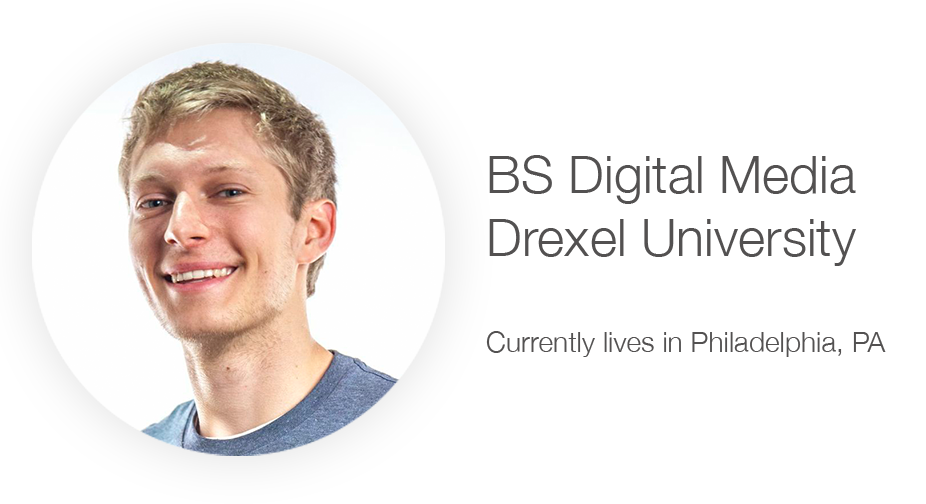
<style>
.page{position:relative;width:926px;height:504px;background:#ffffff}
.page>*{position:absolute;margin:0}
.t1{font:28.3px "HelveticaNeue-Light";color:#535151}
.t2{font:52.2px "HelveticaNeue-Light";color:#535151}
</style>
<div class="page">
<p class="t1" style="left:486px;top:155px;width:400px;height:202px"><span class="t2">BS Digital Media<br>Drexel University<br><br></span>Currently lives in Philadelphia, PA</p>
</div>
